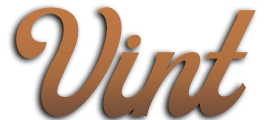
<style>
.page{position:relative;width:270px;height:120px;background:#ffffff}
.page>*{position:absolute;margin:0}
.t1{font:150px "MilestoneFreeVersion-Script"}
</style>
<div class="page">
<p class="t1" style="left:16px;top:7px;width:240px;height:111px">Vint</p>
</div>
